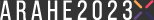
<style>
.page{position:relative;width:154px;height:20px;background:#333333}
.page>*{position:absolute;margin:0}
.t1{font:27.5px "BebasNeueRegular";letter-spacing:0.16em;color:#ffffff}
</style>
<div class="page">
<p class="t1" style="left:0px;top:0px;width:132px;height:20px">ARAHE2023</p>
</div>
